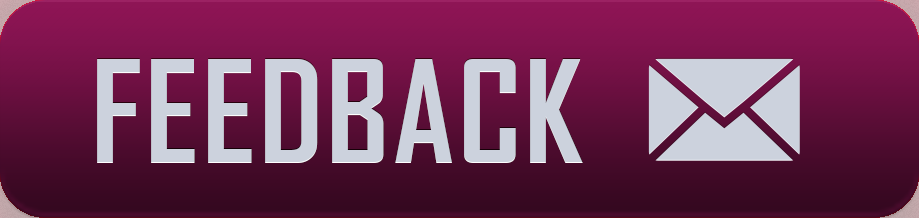
<style>
.page{position:relative;width:919px;height:218px}
.page>*{position:absolute;margin:0}
.t1{font:135.8px "AgencyFB-Bold";letter-spacing:0.025em;color:#ccd2dd;text-transform:uppercase}
</style>
<div class="page">
<p class="t1" style="left:97px;top:59px;width:486px;height:104px">Feedback</p>
</div>
